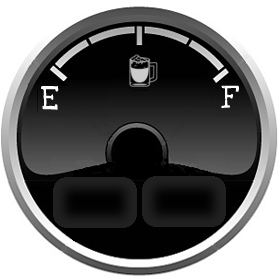
<style>
.page{position:relative;width:279px;height:277px;background:#ffffff}
.page>*{position:absolute;margin:0}
.t1{font:25px "LoveYaLikeASister";color:#ffffff}
</style>
<div class="page">
<p class="t1" style="left:41px;top:86px;width:18px;height:24px">E</p>
<p class="t1" style="left:221px;top:85px;width:18px;height:23px">F</p>
</div>
